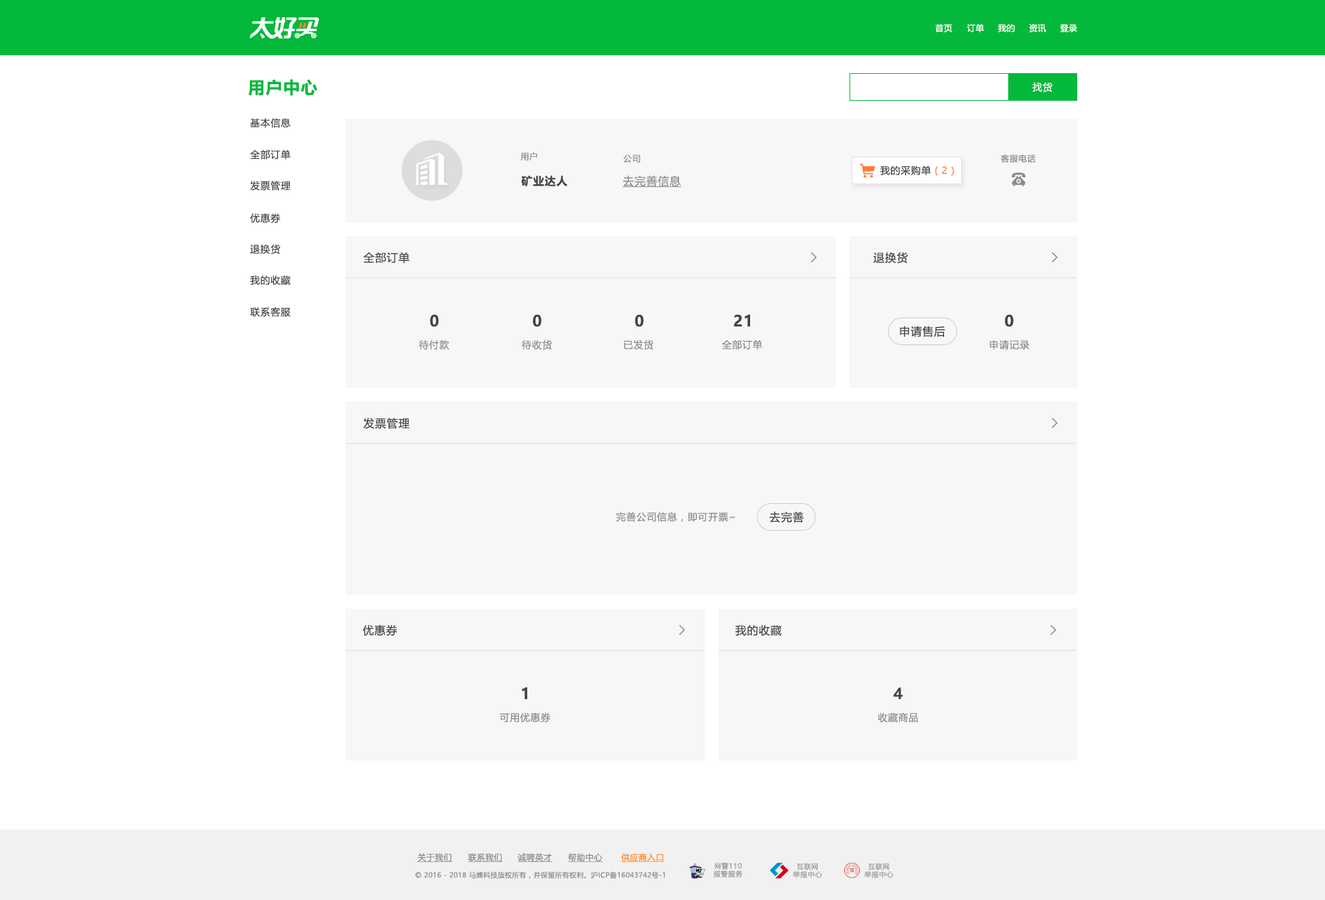
<style>
.page{position:relative;width:1325px;height:900px;background:#ffffff}
.page>*{position:absolute;margin:0}
.t1{font:8.3px "MicrosoftYaHeiUI";letter-spacing:0.04em;color:#ffffff}
.t2{font:16.6px "MicrosoftYaHeiUI-Bold";letter-spacing:0.06em;color:#04b83b}
.t3{font:9.7px "MicrosoftYaHei";letter-spacing:0.06em;color:#f7f7f7}
.t4{font:9.6px "MicrosoftYaHeiUI";letter-spacing:0.06em;color:#444444}
.t5{font:8.3px "MicrosoftYaHeiUI";letter-spacing:0.06em;color:#888888}
.t6{font:9.7px "MicrosoftYaHeiUI";letter-spacing:0.06em;color:#444444}
.t7{font:9.7px "MicrosoftYaHeiUI";letter-spacing:0.06em;color:#ff7b41}
.t8{font:11px "MicrosoftYaHeiUI-Bold";letter-spacing:0.06em;color:#444444}
.t9{font:11px "MicrosoftYaHeiUI";letter-spacing:0.06em;color:#8c8c8c;text-decoration:underline}
.t10{font:11px "MicrosoftYaHeiUI";letter-spacing:0.06em;color:#444444}
.t11{font:13.8px "FangSong";color:#8c8c8c;font-weight:bold}
.t12{font:15.2px "MicrosoftYaHeiUI-Bold";letter-spacing:0.06em;color:#444444}
.t13{font:9.7px "MicrosoftYaHeiUI";letter-spacing:0.06em;color:#8c8c8c}
.t14{font:8.3px "MicrosoftYaHeiUI";letter-spacing:0.04em;color:#8c8c8c;text-decoration:underline}
.t15{font:8.3px "MicrosoftYaHeiUI";letter-spacing:0.04em;color:#ff8b25;text-decoration:underline}
.t16{font:6.9px/8px "MicrosoftYaHei";letter-spacing:0.06em;color:#999999}
.t17{font:6.9px "MicrosoftYaHeiUI";letter-spacing:0.04em;color:#8c8c8c}
</style>
<div class="page">
<p class="t1" style="left:935px;top:23px;width:17px;height:9px">首页</p>
<p class="t1" style="left:967px;top:23px;width:17px;height:9px">订单</p>
<p class="t1" style="left:998px;top:23px;width:17px;height:9px">我的</p>
<p class="t1" style="left:1029px;top:23px;width:17px;height:9px">资讯</p>
<p class="t1" style="left:1060px;top:24px;width:17px;height:8px">登录</p>
<p class="t2" style="left:248px;top:79px;width:69px;height:17px">用户中心</p>
<p class="t3" style="left:1032px;top:82px;width:20px;height:10px">找货</p>
<p class="t4" style="left:250px;top:118px;width:41px;height:10px">基本信息</p>
<p class="t4" style="left:250px;top:150px;width:41px;height:9px">全部订单</p>
<p class="t5" style="left:520px;top:152px;width:18px;height:9px">用户</p>
<p class="t5" style="left:623px;top:155px;width:17px;height:8px">公司</p>
<p class="t5" style="left:1001px;top:154px;width:35px;height:9px">客服电话</p>
<p class="t6" style="left:880px;top:166px;width:74px;height:10px">我的采购单<span class="t7">（2）</span></p>
<p class="t4" style="left:250px;top:181px;width:41px;height:9px">发票管理</p>
<p class="t8" style="left:521px;top:175px;width:47px;height:12px">矿业达人</p>
<p class="t9" style="left:622px;top:175px;width:60px;height:12px">去完善信息</p>
<p class="t4" style="left:250px;top:213px;width:30px;height:10px">优惠券</p>
<p class="t4" style="left:250px;top:244px;width:30px;height:10px">退换货</p>
<p class="t10" style="left:363px;top:252px;width:47px;height:12px">全部订单</p>
<p class="t11" style="left:811px;top:252px;width:6px;height:10px;rotate:180deg">&lt;</p>
<p class="t10" style="left:873px;top:252px;width:35px;height:12px">退换货</p>
<p class="t11" style="left:1052px;top:252px;width:6px;height:10px;rotate:180deg">&lt;</p>
<p class="t4" style="left:250px;top:275px;width:41px;height:10px">我的收藏</p>
<p class="t4" style="left:250px;top:307px;width:41px;height:10px">联系客服</p>
<p class="t12" style="left:430px;top:315px;width:9px;height:12px">0</p>
<p class="t12" style="left:533px;top:315px;width:9px;height:12px">0</p>
<p class="t12" style="left:635px;top:315px;width:9px;height:12px">0</p>
<p class="t12" style="left:734px;top:314px;width:16px;height:12px">21</p>
<p class="t12" style="left:1005px;top:315px;width:9px;height:12px">0</p>
<p class="t10" style="left:900px;top:326px;width:45px;height:11px">申请售后</p>
<p class="t13" style="left:419px;top:340px;width:30px;height:10px">待付款</p>
<p class="t13" style="left:522px;top:340px;width:30px;height:10px">待收货</p>
<p class="t13" style="left:624px;top:340px;width:30px;height:10px">已发货</p>
<p class="t13" style="left:722px;top:340px;width:41px;height:10px">全部订单</p>
<p class="t13" style="left:990px;top:340px;width:40px;height:10px">申请记录</p>
<p class="t10" style="left:363px;top:418px;width:47px;height:11px">发票管理</p>
<p class="t11" style="left:1052px;top:418px;width:6px;height:10px;rotate:180deg">&lt;</p>
<p class="t13" style="left:616px;top:512px;width:119px;height:10px">完善公司信息，即可开票~</p>
<p class="t10" style="left:769px;top:511px;width:35px;height:12px">去完善</p>
<p class="t10" style="left:362px;top:625px;width:36px;height:11px">优惠券</p>
<p class="t11" style="left:679px;top:625px;width:6px;height:10px;rotate:180deg">&lt;</p>
<p class="t10" style="left:735px;top:625px;width:47px;height:11px">我的收藏</p>
<p class="t11" style="left:1050px;top:625px;width:7px;height:10px;rotate:180deg">&lt;</p>
<p class="t12" style="left:522px;top:687px;width:5px;height:12px">1</p>
<p class="t12" style="left:893px;top:687px;width:10px;height:12px">4</p>
<p class="t13" style="left:500px;top:712px;width:51px;height:11px">可用优惠券</p>
<p class="t13" style="left:878px;top:712px;width:40px;height:11px">收藏商品</p>
<p class="t14" style="left:418px;top:853px;width:35px;height:9px">关于我们</p>
<p class="t14" style="left:468px;top:853px;width:35px;height:9px">联系我们</p>
<p class="t14" style="left:518px;top:853px;width:35px;height:9px">诚聘英才</p>
<p class="t14" style="left:568px;top:853px;width:35px;height:9px">帮助中心</p>
<p class="t15" style="left:621px;top:853px;width:44px;height:9px">供应商入口</p>
<p class="t16" style="left:714px;top:862px;width:29px;height:16px;text-align:center">网警110<br>报警服务</p>
<p class="t16" style="left:793px;top:863px;width:29px;height:15px;text-align:center">互联网<br>举报中心</p>
<p class="t16" style="left:864px;top:863px;width:30px;height:15px;text-align:center">互联网<br>举报中心</p>
<p class="t17" style="left:415px;top:871px;width:250px;height:8px">© 2016 - 2018 马蜂科技版权所有，并保留所有权利。沪ICP备16043742号-1</p>
</div>
